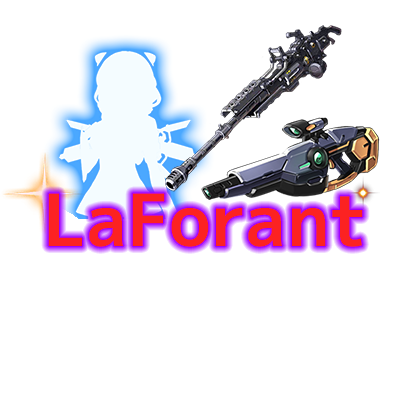
<style>
.page{position:relative;width:400px;height:400px;background:#ffffff}
.page>*{position:absolute;margin:0}
.t1{font:72px "MigMix-2P-Bold";color:#fc2222}
</style>
<div class="page">
<p class="t1" style="left:48px;top:193px;width:315px;height:54px">LaForant</p>
</div>
